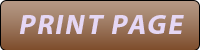
<style>
.page{position:relative;width:200px;height:50px}
.page>*{position:absolute;margin:0}
.t1{font:48px "MyriadPro-Bold";letter-spacing:0.05em;color:#e5d7f4;text-transform:uppercase;font-style:italic}
</style>
<div class="page">
<p class="t1" style="left:19px;top:15px;width:165px;height:19px">Print PAGE</p>
</div>
